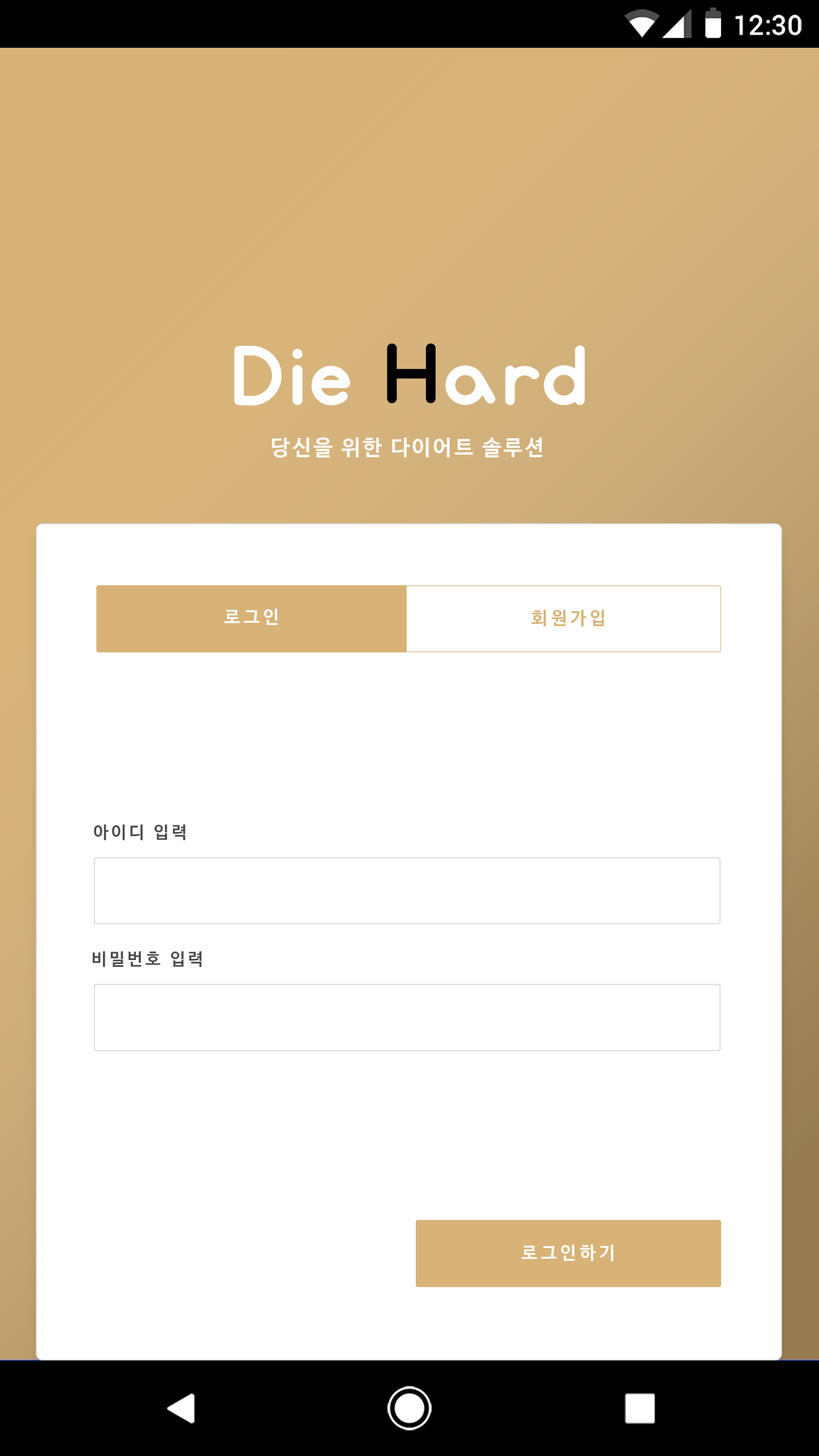
<style>
.page{position:relative;width:819px;height:1456px;background:#ffffff}
.page>*{position:absolute;margin:0}
.t1{font:27.3px "Roboto-Medium";color:#ffffff}
.t2{font:21.4px "NanumBarunGothicBold";letter-spacing:0.1em;color:#ffffff}
.t3{font:18px "NanumBarunGothicBold";letter-spacing:0.2em;color:#ffffff}
.t4{font:18px "NanumBarunGothicBold";letter-spacing:0.2em;color:#d8b276}
.t5{font:17.1px "NanumBarunGothicBold";letter-spacing:0.16em;color:#4d4d4d}
</style>
<div class="page">
<p class="t1" style="left:735px;top:15px;width:67px;height:21px">12:30</p>
<p class="t2" style="left:272px;top:437px;width:271px;height:21px">당신을 위한 다이어트 솔루션</p>
<p class="t3" style="left:224px;top:609px;width:54px;height:16px">로그인</p>
<p class="t4" style="left:532px;top:610px;width:72px;height:17px">회원가입</p>
<p class="t5" style="left:94px;top:824px;width:91px;height:17px">아이디 입력</p>
<p class="t5" style="left:93px;top:951px;width:109px;height:16px">비밀번호 입력</p>
<p class="t3" style="left:522px;top:1244px;width:92px;height:17px">로그인하기</p>
</div>
